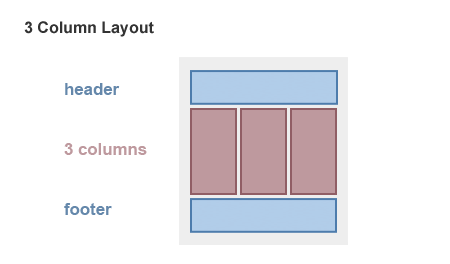
<style>
.page{position:relative;width:450px;height:264px;background:#ffffff}
.page>*{position:absolute;margin:0}
.t1{font:16px "Arial-BoldMT";color:#333333}
.t2{font:16.8px/60.2px "Arial-BoldMT";color:#be999e}
.t3{font:16.8px/60.2px "Arial-BoldMT";color:#6588ab}
</style>
<div class="page">
<p class="t1" style="left:24px;top:21px;width:130px;height:16px">3 Column Layout</p>
<p class="t2" style="left:64px;top:83px;width:83px;height:132px"><span class="t3">header<br></span>3 columns <br><span class="t3">footer</span></p>
</div>
